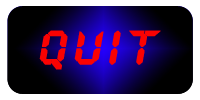
<style>
.page{position:relative;width:200px;height:100px}
.page>*{position:absolute;margin:0}
.t1{font:48px "QuartzMS";letter-spacing:0.075em;color:#fa0202;font-weight:bold;font-style:italic}
</style>
<div class="page">
<p class="t1" style="left:39px;top:30px;width:122px;height:40px">qUIT</p>
<p class="t1" style="left:39px;top:30px;width:122px;height:40px">QUIT</p>
</div>
